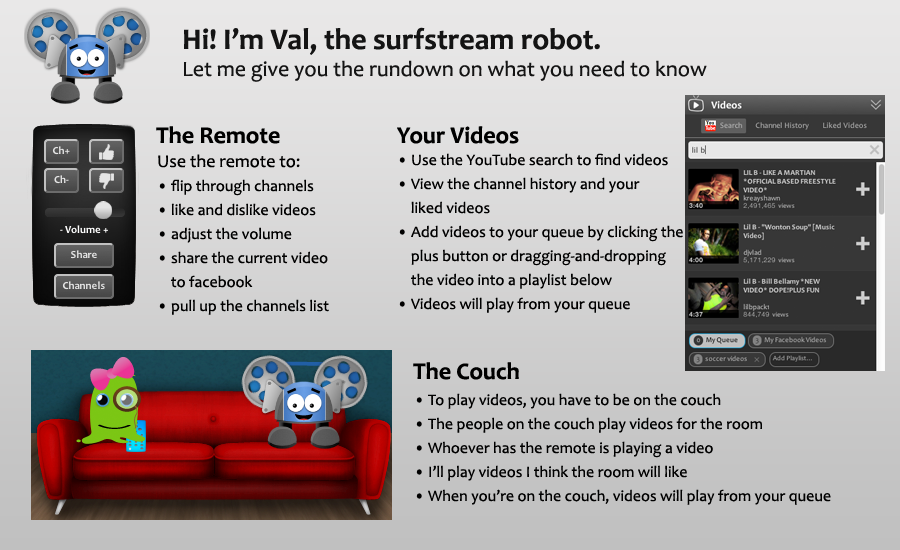
<style>
.page{position:relative;width:900px;height:550px}
.page>*{position:absolute;margin:0}
.t1{font:30px "Candara-Bold";color:#141414}
.t2{font:22px "Candara";color:#141414}
.t3{font:24px "Candara-Bold";color:#000000}
.t4{font:16px/24px "Candara";color:#000000}
.t5{font:18px "Candara";color:#000000}
</style>
<div class="page">
<p class="t1" style="left:184px;top:27px;width:416px;height:28px">Hi! I’m Val, the surfstream robot.</p>
<p class="t2" style="left:184px;top:60px;width:523px;height:22px">Let me give you the rundown on what you need to know</p>
<p class="t3" style="left:156px;top:126px;width:124px;height:18px">The Remote</p>
<p class="t3" style="left:397px;top:126px;width:122px;height:18px">Your Videos</p>
<p class="t4" style="left:158px;top:154px;width:171px;height:161px"><span class="t5">Use the remote to:<br></span>• flip through channels<br>• like and dislike videos<br>• adjust the volume<br>• share the current video<br>    to facebook<br>• pull up the channels list</p>
<p class="t4" style="left:399px;top:153px;width:284px;height:160px">• Use the YouTube search to find videos<br>• View the channel history and your <br>    liked videos<br>• Add videos to your queue by clicking the <br>    plus button or dragging-and-dropping <br>    the video into a playlist below<br>• Videos will play from your queue</p>
<p class="t3" style="left:413px;top:362px;width:106px;height:18px">The Couch</p>
<p class="t4" style="left:416px;top:393px;width:415px;height:112px">• To play videos, you have to be on the couch<br>• The people on the couch play videos for the room<br>• Whoever has the remote is playing a video<br>• I’ll play videos I think the room will like<br>• When you’re on the couch, videos will play from your queue</p>
</div>
